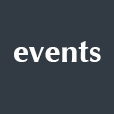
<style>
.page{position:relative;width:114px;height:114px;background:#323b44}
.page>*{position:absolute;margin:0}
.t1{font:32px "Optima-Bold";color:#ffffff}
</style>
<div class="page">
<p class="t1" style="left:14px;top:41px;width:87px;height:21px">events</p>
</div>
